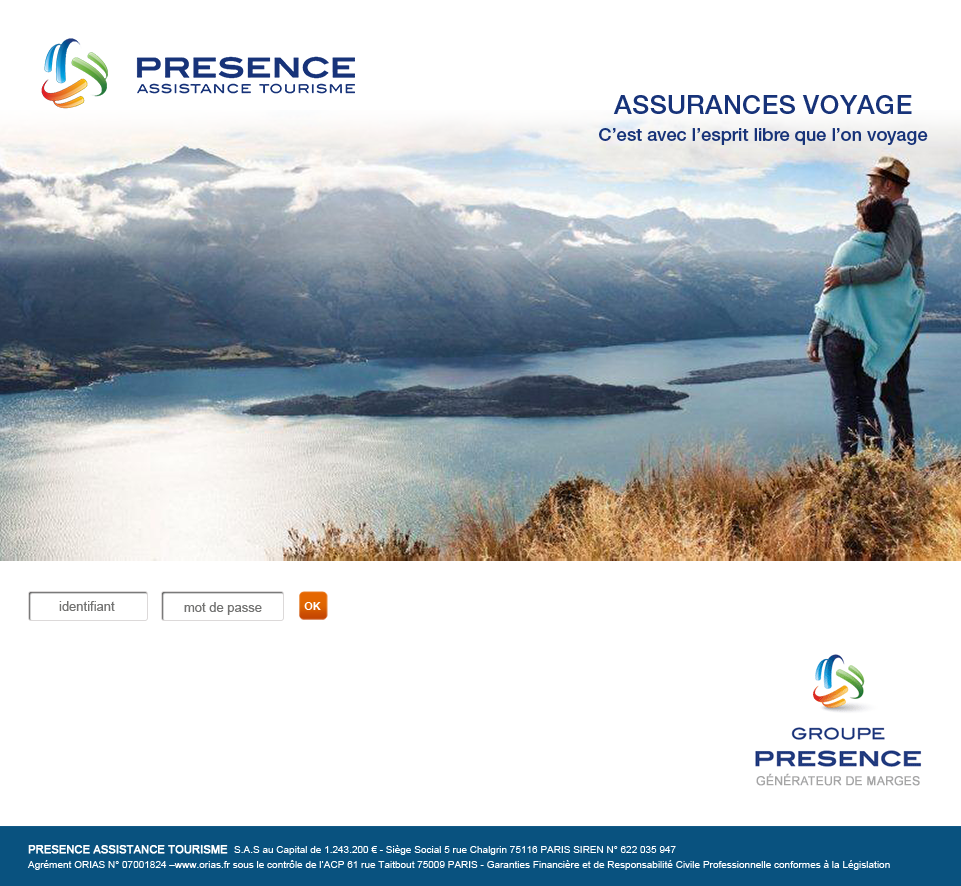
<style>
.page{position:relative;width:961px;height:886px;background:#ffffff}
.page>*{position:absolute;margin:0}
.t1{font:26.4px "HelveticaNeueLTPro-Md";letter-spacing:0.01em;color:#173379;text-transform:uppercase}
.t2{font:18.1px "HelveticaNeueLTPro-Md";color:#173379}
.t3{font:13px "ArialMT";color:#737372}
.t4{font:11px "Arial-BoldMT";color:#ffffff;text-transform:uppercase}
.t5{font:10px/14.8px "ArialMT";color:#ffffff}
.t6{font:11px/14.8px "ArialMT";letter-spacing:-0.01em;color:#ffffff;font-weight:bold}
</style>
<div class="page">
<p class="t1" style="left:613px;top:95px;width:299px;height:19px">Assurances Voyage</p>
<p class="t2" style="left:599px;top:128px;width:329px;height:17px">C’est avec l’esprit libre que l’on voyage</p>
<p class="t3" style="left:59px;top:601px;width:56px;height:10px">identifiant</p>
<p class="t3" style="left:184px;top:602px;width:78px;height:13px">mot de passe</p>
<p class="t4" style="left:304px;top:602px;width:17px;height:8px">Ok</p>
<p class="t5" style="left:27px;top:845px;width:863px;height:25px"><span class="t6">PRESENCE ASSISTANCE TOURISME  </span>S.A.S au Capital de 1.243.200 € - Siège Social 5 rue Chalgrin 75116 PARIS SIREN N° 622 035 947<br>Agrément ORIAS N° 07001824 –www.orias.fr sous le contrôle de l’ACP 61 rue Taitbout 75009 PARIS - Garanties Financière et de Responsabilité Civile Professionnelle conformes à la Législation</p>
</div>
